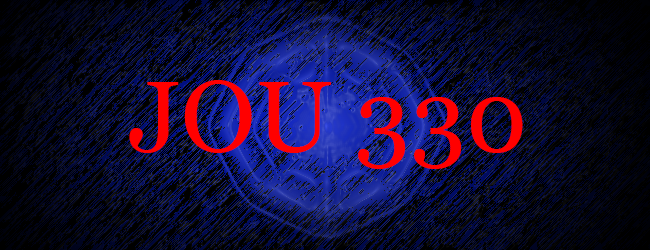
<style>
.page{position:relative;width:650px;height:250px}
.page>*{position:absolute;margin:0}
.t1{font:100px "Georgia";color:#ff0000}
</style>
<div class="page">
<p class="t1" style="left:129px;top:80px;width:394px;height:89px">JOU 330</p>
</div>
